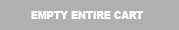
<style>
.page{position:relative;width:179px;height:30px;background:#b0b0b0}
.page>*{position:absolute;margin:0}
.t1{font:18.2px "Arial-Black";color:#ffffff;scale:0.9 1}
</style>
<div class="page">
<p class="t1" style="left:31px;top:11px;width:113px;height:8px">EMPTY ENTIRE CART</p>
</div>
